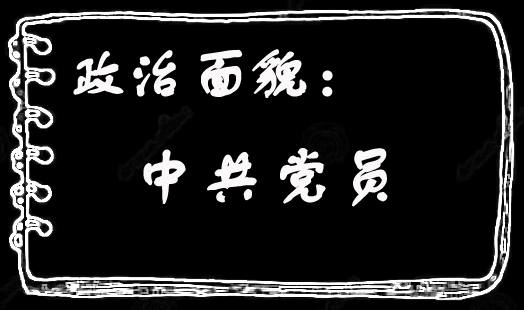
<style>
.page{position:relative;width:524px;height:310px;background:#000000}
.page>*{position:absolute;margin:0}
.t1{font:60px "FZSTK--GBK1-0";color:#faf8f8;font-weight:bold}
.t2{font:66.7px "FZSTK--GBK1-0";color:#faf8f8;font-weight:bold}
</style>
<div class="page">
<p class="t1" style="left:73px;top:49px;width:260px;height:49px">政治面貌：</p>
<p class="t2" style="left:143px;top:148px;width:245px;height:59px">中共党员</p>
</div>
